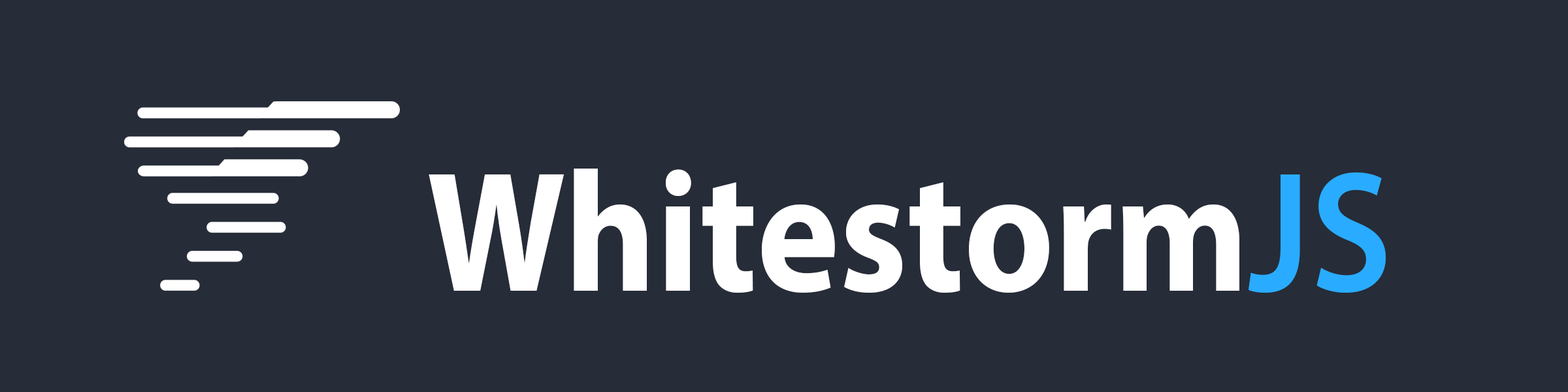
<style>
.page{position:relative;width:1568px;height:392px;background:#262c38}
.page>*{position:absolute;margin:0}
.t1{font:172.5px "MyriadPro-Bold";color:#ffffff;scale:0.91 1}
.t2{font:172.5px "MyriadPro-Semibold";color:#29acff;scale:0.91 1}
</style>
<div class="page">
<p class="t1" style="left:429px;top:169px;width:957px;height:124px">Whitestorm<span class="t2">JS</span></p>
</div>
